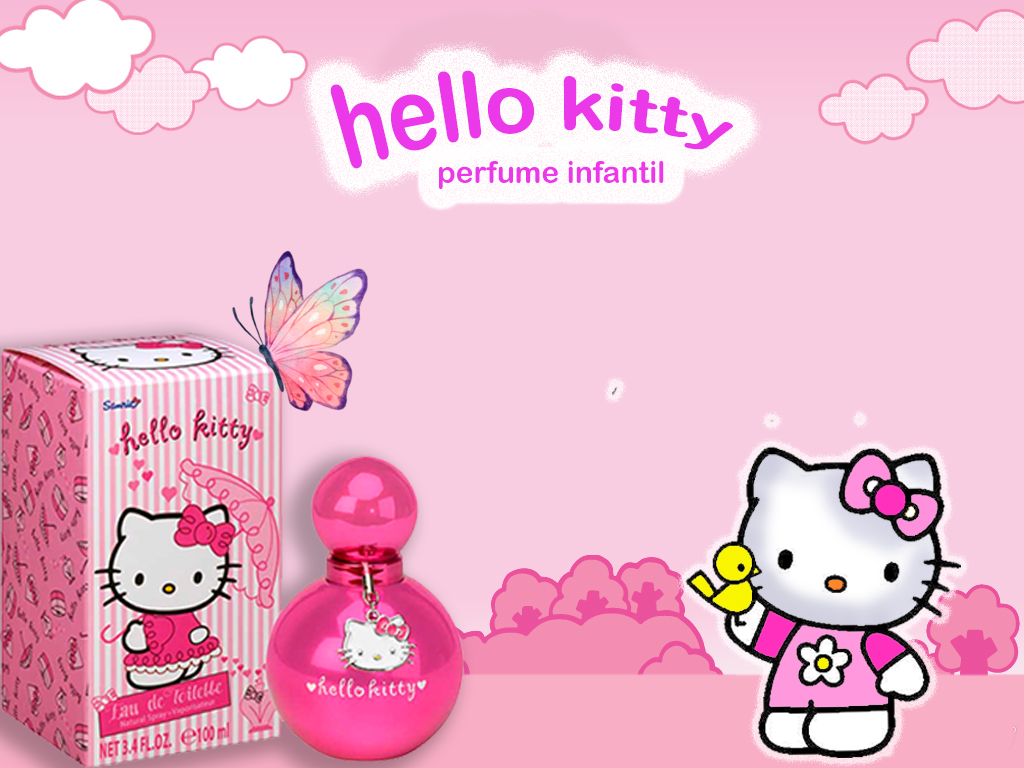
<style>
.page{position:relative;width:1024px;height:768px;background:#f8cde1}
.page>*{position:absolute;margin:0}
.t1{font:80px "ArialRoundedMTBold";color:#eb38e9}
.t2{font:30px "ArialRoundedMTBold";color:#eb38e9}
</style>
<div class="page">
<p class="t1" style="left:330px;top:70px;width:403px;height:99px">hello kitty</p>
<p class="t2" style="left:439px;top:161px;width:225px;height:28px">perfume infantil</p>
</div>
